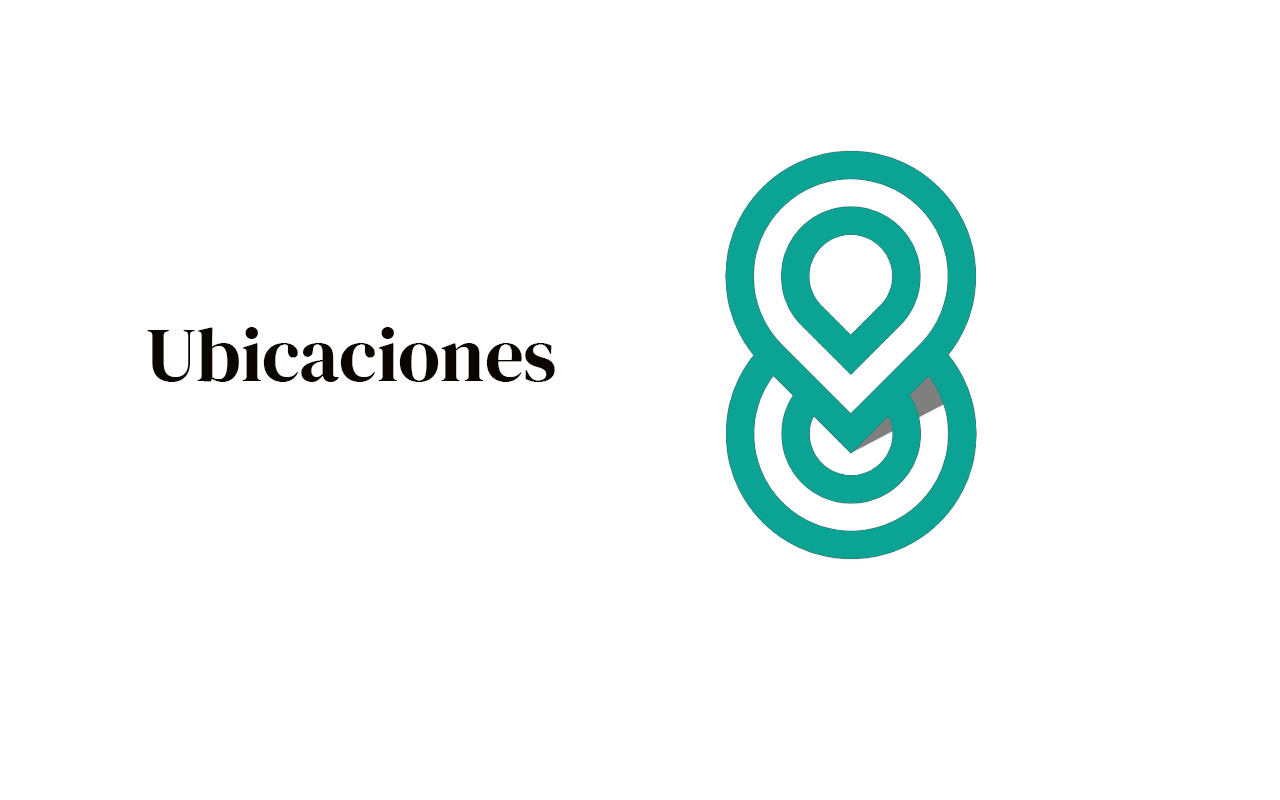
<style>
.page{position:relative;width:1280px;height:800px;background:#ffffff}
.page>*{position:absolute;margin:0}
.t1{font:76.7px "DMSerifDisplay-Regular";color:#0b0600}
</style>
<div class="page">
<p class="t1" style="left:147px;top:327px;width:408px;height:55px">Ubicaciones</p>
</div>
